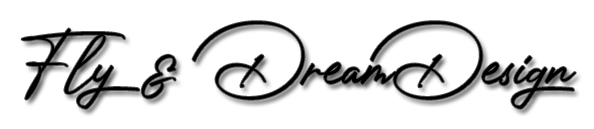
<style>
.page{position:relative;width:594px;height:129px;background:#ffffff}
.page>*{position:absolute;margin:0}
.t1{font:80px "PhotographSignature";color:#000000}
</style>
<div class="page">
<p class="t1" style="left:21px;top:21px;width:555px;height:88px">Fly &amp; DreamDesign</p>
</div>
